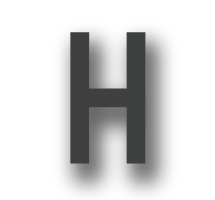
<style>
.page{position:relative;width:215px;height:200px;background:#ffffff}
.page>*{position:absolute;margin:0}
.t1{font:150px "Manteka";color:#3f4040}
</style>
<div class="page">
<p class="t1" style="left:70px;top:32px;width:76px;height:132px">H</p>
</div>
